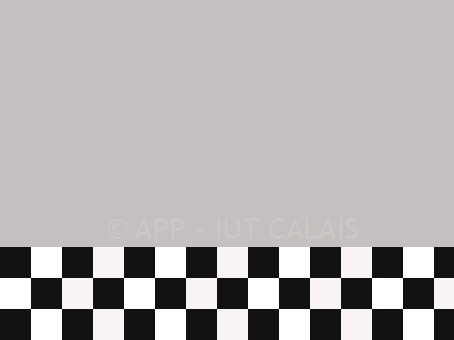
<style>
.page{position:relative;width:454px;height:340px;background:#c5bfbf}
.page>*{position:absolute;margin:0}
.t1{font:30.4px "TrebuchetMS";color:#ccc6c5}
</style>
<div class="page">
<p class="t1" style="left:107px;top:218px;width:251px;height:21px">© APP - IUT CALAIS</p>
</div>
